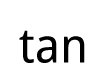
<style>
.page{position:relative;width:105px;height:83px;background:#ffffff}
.page>*{position:absolute;margin:0}
.t1{font:47.9px "DroidSans";color:#000000}
</style>
<div class="page">
<p class="t1" style="left:19px;top:30px;width:66px;height:33px">tan</p>
</div>
